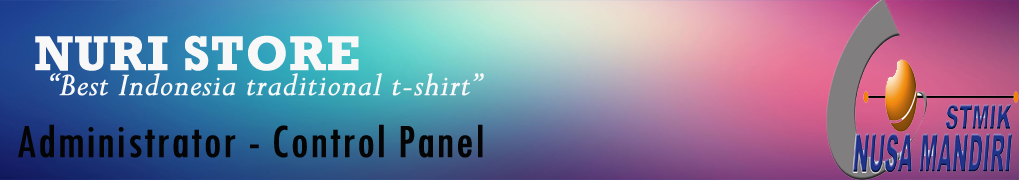
<style>
.page{position:relative;width:1019px;height:180px}
.page>*{position:absolute;margin:0}
.t1{font:49.6px "Rockwell-Bold";color:#f8f8f8;font-weight:bold}
.t2{font:36px "Perpetua-Italic";color:#f8f8f8;font-weight:bold}
.t3{font:49.6px "TwCenMT-Condensed";color:#040404;font-weight:bold}
</style>
<div class="page">
<p class="t1" style="left:35px;top:35px;width:324px;height:36px">NURI STORE</p>
<p class="t2" style="left:50px;top:73px;width:434px;height:23px">“Best Indonesia traditional t-shirt”</p>
<p class="t3" style="left:18px;top:124px;width:465px;height:34px">Administrator - Control Panel</p>
</div>
